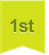
<style>
.page{position:relative;width:49px;height:55px}
.page>*{position:absolute;margin:0}
.t1{font:18px "Arial-BoldMT";letter-spacing:-0.04em;color:#75870d}
</style>
<div class="page">
<p class="t1" style="left:10px;top:20px;width:24px;height:14px">1st</p>
<p class="t1" style="left:10px;top:19px;width:24px;height:14px">1st</p>
</div>
